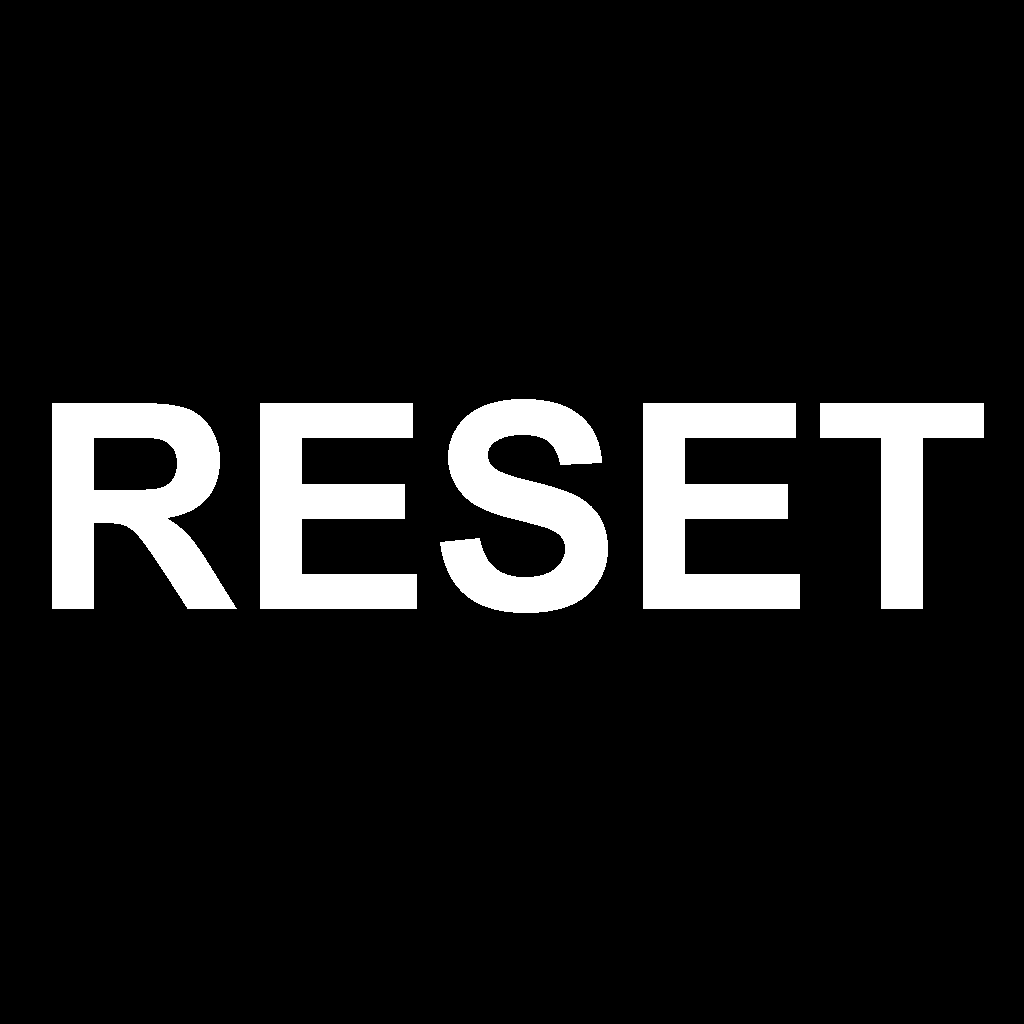
<style>
.page{position:relative;width:1024px;height:1024px;background:#000000}
.page>*{position:absolute;margin:0}
.t1{font:287.5px "Arial-BoldMT";color:#ffffff}
</style>
<div class="page">
<p class="t1" style="left:52px;top:399px;width:932px;height:214px">RESET</p>
</div>
